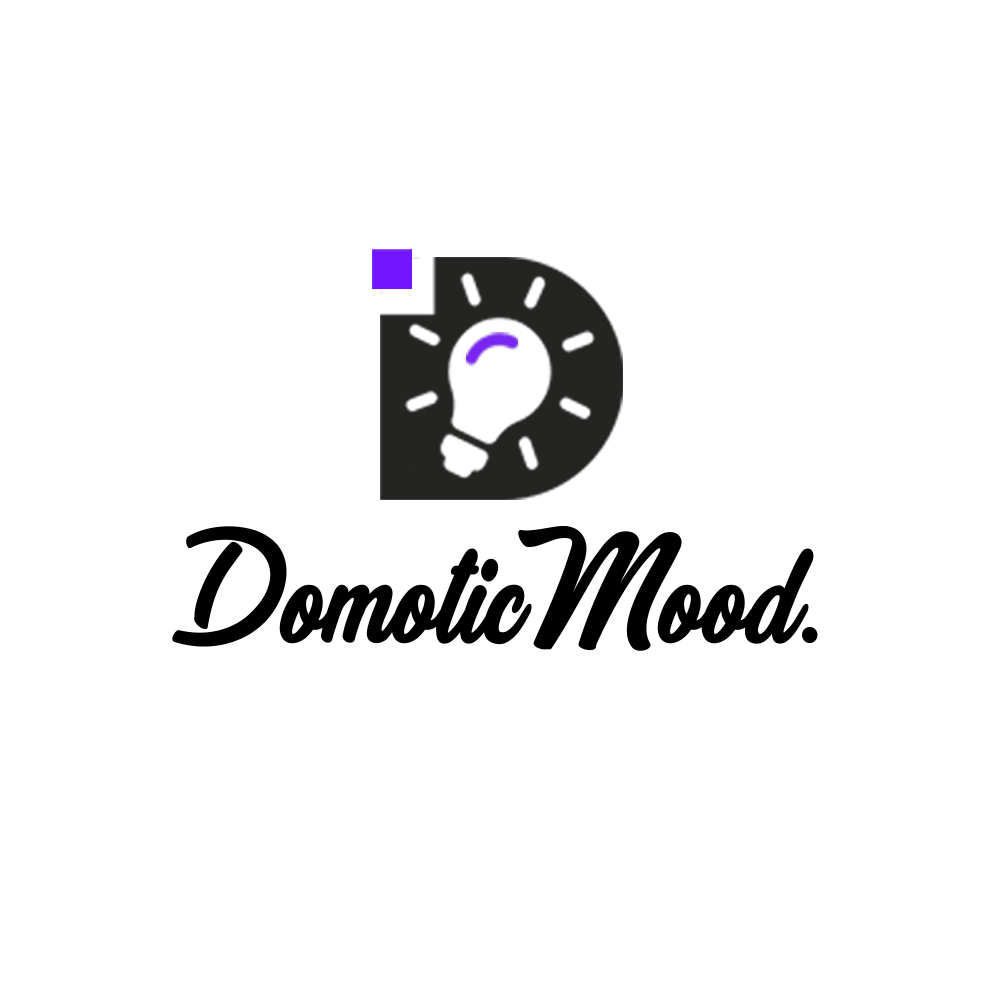
<style>
.page{position:relative;width:1000px;height:1000px;background:#ffffff}
.page>*{position:absolute;margin:0}
.t1{font:142.1px "GottobeRealPersonalUse-Regular";color:#000000}
.t2{font:142.1px "TimesNewRomanPSMT";color:#000000}
</style>
<div class="page">
<p class="t1" style="left:172px;top:526px;width:646px;height:125px">DomoticMood<span class="t2">.</span></p>
</div>
